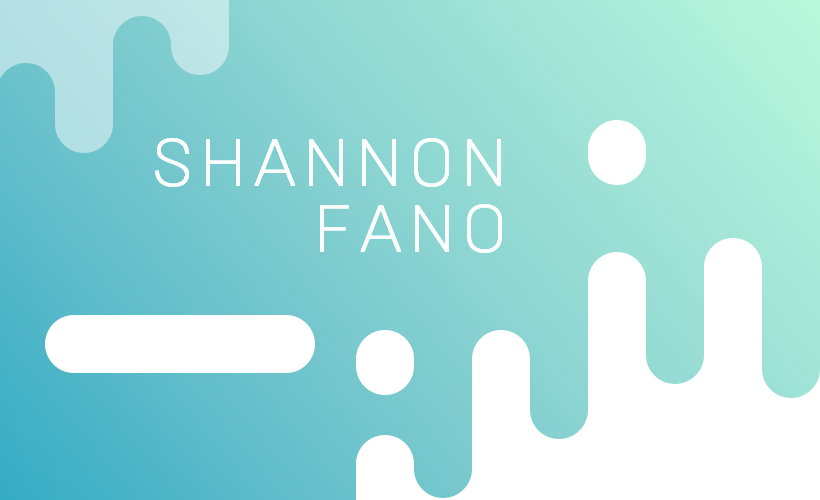
<style>
.page{position:relative;width:820px;height:500px}
.page>*{position:absolute;margin:0}
.t1{font:67px/66.3px "BrutalType-Light";letter-spacing:0.1em;color:#ffffff;text-transform:uppercase}
</style>
<div class="page">
<p class="t1" style="left:155px;top:138px;width:347px;height:115px;text-align:right">Shannon<br>fano</p>
<p class="t1" style="left:155px;top:138px;width:347px;height:115px;text-align:right">Shannon<br>fano</p>
<p class="t1" style="left:155px;top:138px;width:347px;height:115px;text-align:right">Shannon<br>fano</p>
<p class="t1" style="left:155px;top:138px;width:347px;height:115px;text-align:right">Shannon<br>fano</p>
<p class="t1" style="left:155px;top:138px;width:347px;height:115px;text-align:right">Shannon<br>fano</p>
<p class="t1" style="left:155px;top:138px;width:347px;height:115px;text-align:right">Shannon<br>fano</p>
</div>
